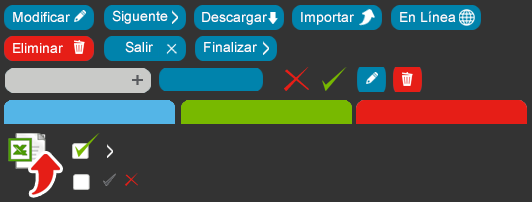
<style>
.page{position:relative;width:532px;height:202px;background:#333333}
.page>*{position:absolute;margin:0}
.t1{font:14px "ArialMT";color:#ffffff}
</style>
<div class="page">
<p class="t1" style="left:13px;top:12px;width:57px;height:10px">Modificar</p>
<p class="t1" style="left:112px;top:10px;width:56px;height:14px">Siguente</p>
<p class="t1" style="left:202px;top:12px;width:65px;height:13px">Descargar</p>
<p class="t1" style="left:301px;top:12px;width:53px;height:13px">Importar</p>
<p class="t1" style="left:400px;top:11px;width:56px;height:11px">En Línea</p>
<p class="t1" style="left:125px;top:41px;width:28px;height:12px">Salir</p>
<p class="t1" style="left:13px;top:43px;width:50px;height:10px">Eliminar</p>
<p class="t1" style="left:204px;top:42px;width:53px;height:10px">Finalizar</p>
</div>
